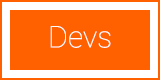
<style>
.page{position:relative;width:160px;height:80px;background:#ff6100}
.page>*{position:absolute;margin:0}
.t1{font:30px "Roboto-Thin";color:#ffffff}
</style>
<div class="page">
<p class="t1" style="left:50px;top:26px;width:61px;height:22px">Devs</p>
</div>
